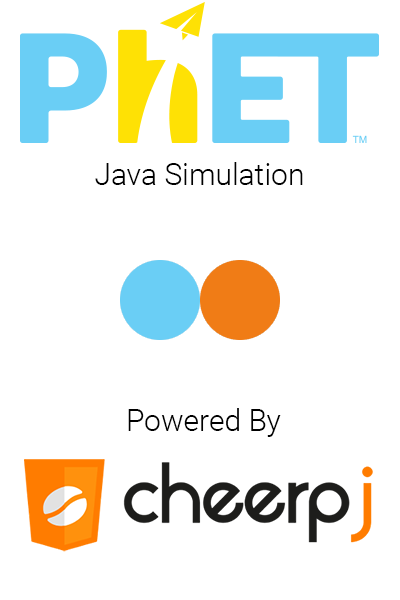
<style>
.page{position:relative;width:400px;height:600px;background:#ffffff}
.page>*{position:absolute;margin:0}
.t1{font:30px "Roboto-Light";color:#000000}
</style>
<div class="page">
<p class="t1" style="left:95px;top:162px;width:208px;height:23px">Java Simulation</p>
<p class="t1" style="left:128px;top:408px;width:153px;height:29px">Powered By</p>
</div>
